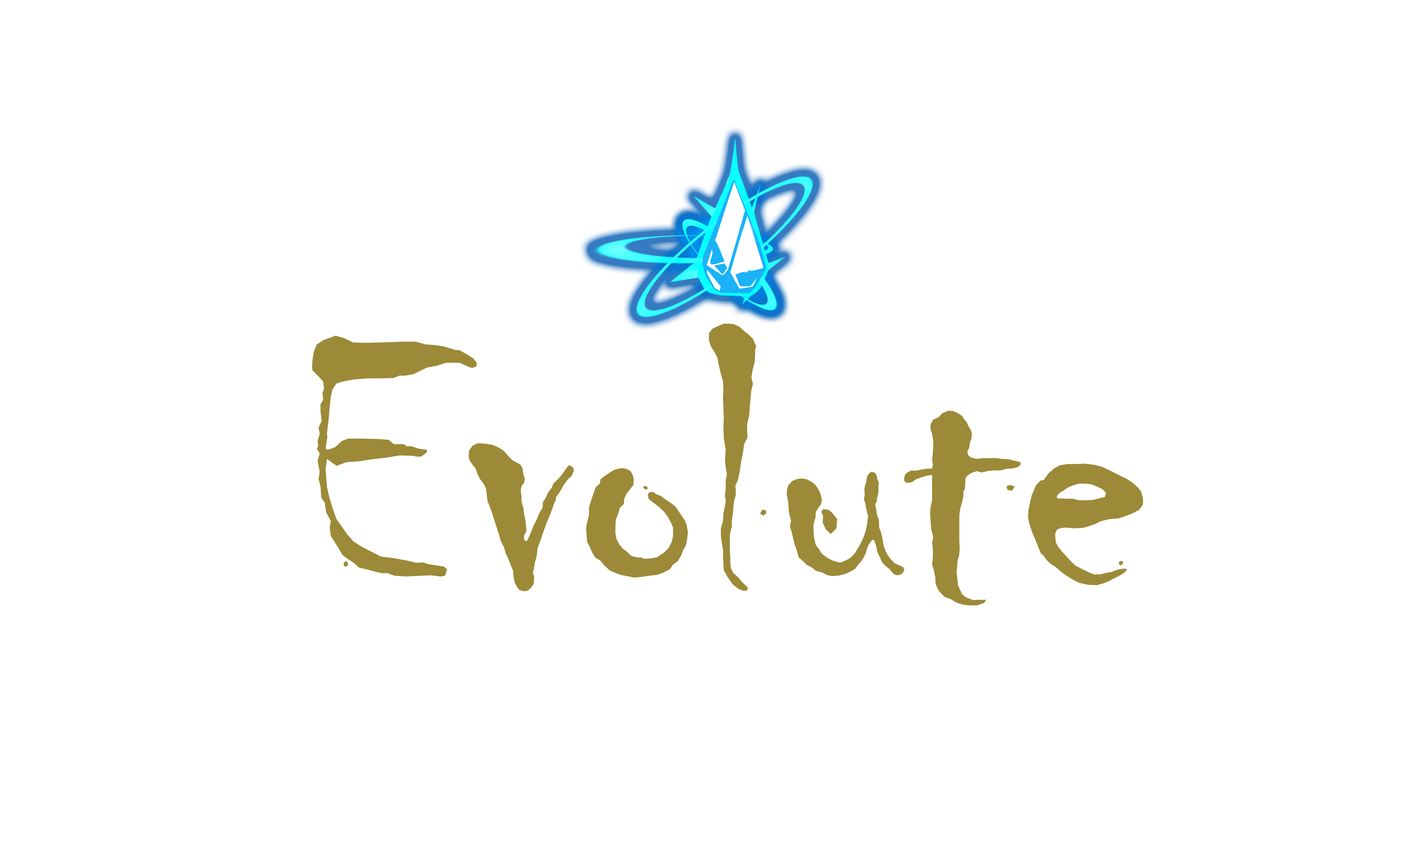
<style>
.page{position:relative;width:1414px;height:843px;background:#ffffff}
.page>*{position:absolute;margin:0}
.t1{font:400.4px "Chiller-Regular";color:#9c8a38}
</style>
<div class="page">
<p class="t1" style="left:312px;top:324px;width:831px;height:282px">Evolute</p>
</div>
